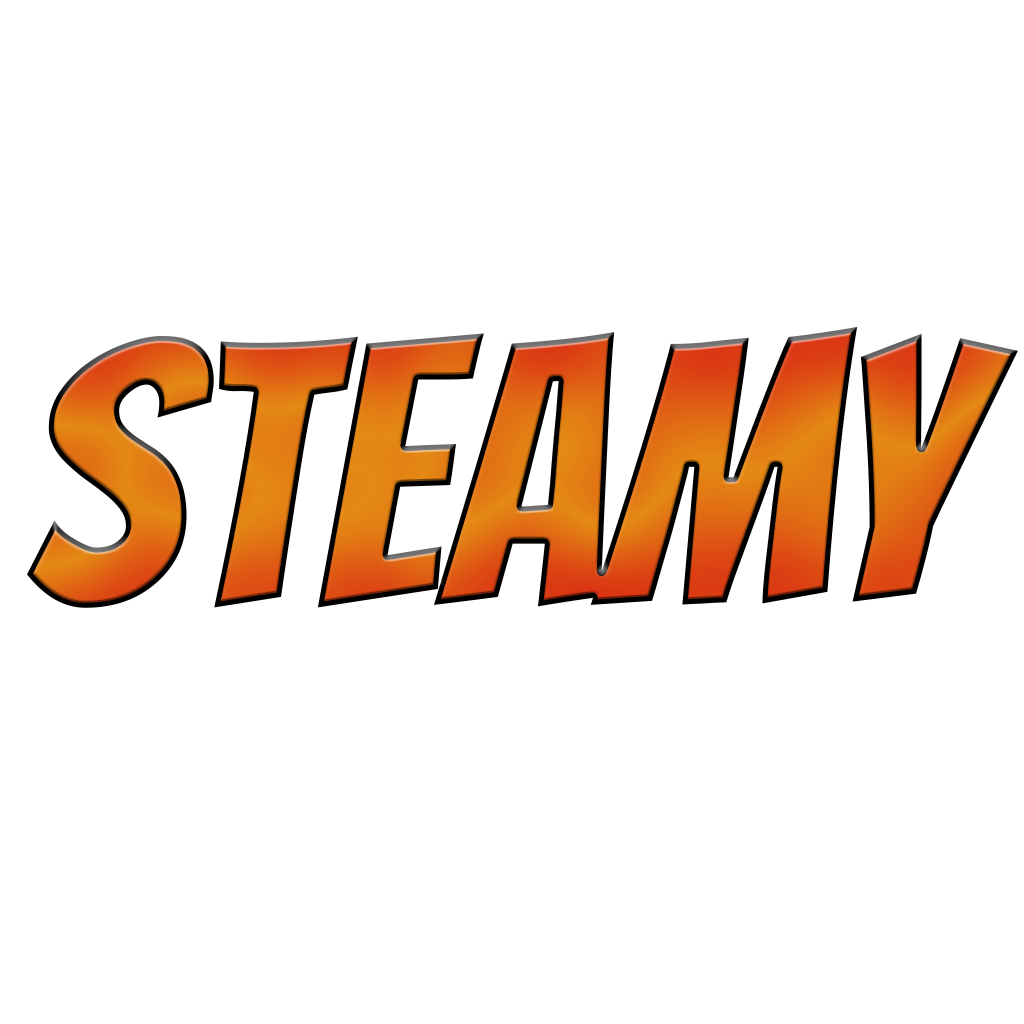
<style>
.page{position:relative;width:1024px;height:1024px;background:#ffffff}
.page>*{position:absolute;margin:0}
.t1{font:370.8px "Bangers-Regular"}
</style>
<div class="page">
<p class="t1" style="left:27px;top:326px;width:991px;height:282px">Steamy</p>
</div>
